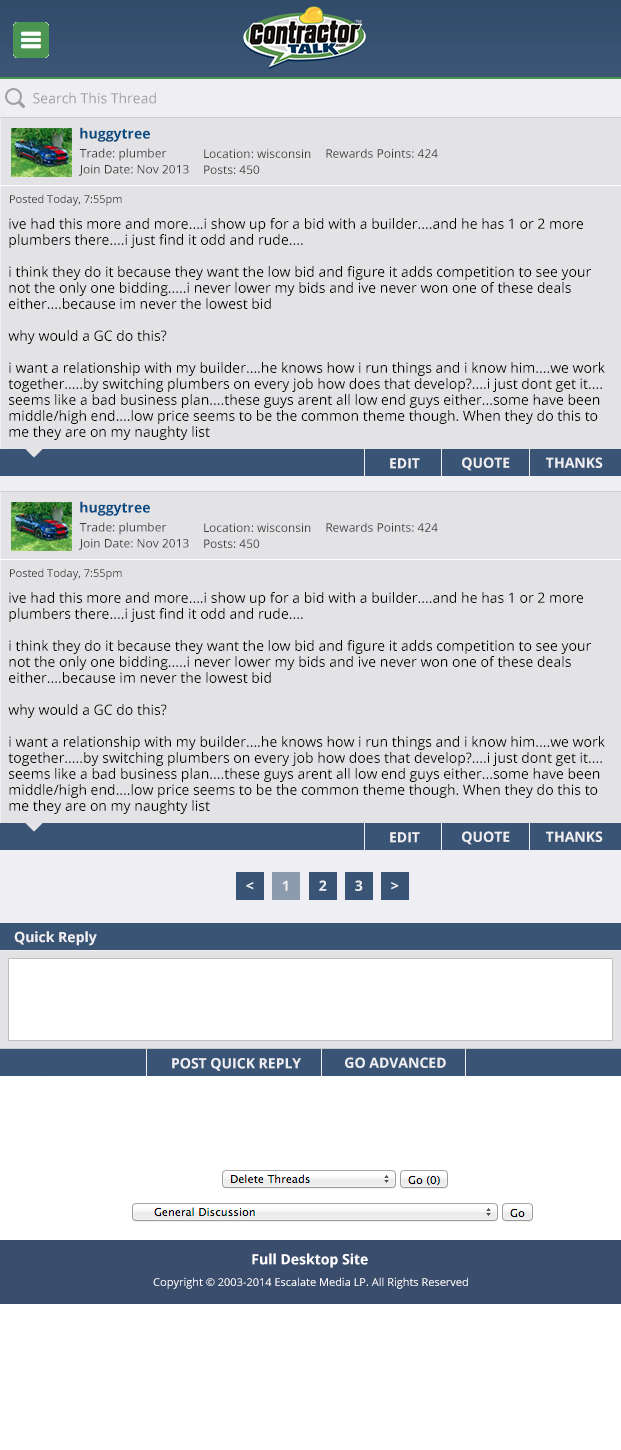
<style>
.page{position:relative;width:621px;height:1450px;background:#e3e3e6}
.page>*{position:absolute;margin:0}
.t1{font:14px "OpenSans";color:#9f9f9f}
.t2{font:14px "OpenSans-Bold";color:#084b82}
.t3{font:12px/16px "OpenSans";color:#3b3b3b}
.t4{font:12px "OpenSans";color:#3b3b3b}
.t5{font:11px "OpenSans";color:#3b3b3b}
.t6{font:14px/16px "OpenSans";color:#000000}
.t7{font:14px "OpenSans-Bold";color:#efeff3}
.t8{font:14px "OpenSans-Bold";color:#ffffff}
.t9{font:11px "OpenSans";color:#ffffff}
</style>
<div class="page">
<p class="t1" style="left:33px;top:92px;width:123px;height:12px">Search This Thread</p>
<p class="t2" style="left:80px;top:127px;width:70px;height:15px">huggytree</p>
<p class="t3" style="left:78px;top:148px;width:111px;height:28px">Trade: plumber<br>Join Date: Nov 2013</p>
<p class="t3" style="left:204px;top:149px;width:107px;height:25px">Location: wisconsin<br>Posts: 450</p>
<p class="t4" style="left:326px;top:148px;width:112px;height:10px">Rewards Points: 424</p>
<p class="t5" style="left:10px;top:194px;width:112px;height:12px">Posted Today, 7:55pm</p>
<p class="t6" style="left:8px;top:218px;width:597px;height:222px">ive had this more and more....i show up for a bid with a builder....and he has 1 or 2 more <br>plumbers there....i just find it odd and rude....<br><br>i think they do it because they want the low bid and figure it adds competition to see your <br>not the only one bidding.....i never lower my bids and ive never won one of these deals <br>either....because im never the lowest bid<br><br>why would a GC do this?<br><br>i want a relationship with my builder....he knows how i run things and i know him....we work <br>together.....by switching plumbers on every job how does that develop?....i just dont get it....<br>seems like a bad business plan....these guys arent all low end guys either...some have been <br>middle/high end....low price seems to be the common theme though. When they do this to <br>me they are on my naughty list</p>
<p class="t7" style="left:390px;top:458px;width:30px;height:11px">EDIT</p>
<p class="t7" style="left:462px;top:457px;width:48px;height:14px">QUOTE</p>
<p class="t7" style="left:546px;top:457px;width:57px;height:11px">THANKS</p>
<p class="t2" style="left:80px;top:501px;width:70px;height:15px">huggytree</p>
<p class="t3" style="left:78px;top:522px;width:111px;height:28px">Trade: plumber<br>Join Date: Nov 2013</p>
<p class="t3" style="left:204px;top:523px;width:107px;height:25px">Location: wisconsin<br>Posts: 450</p>
<p class="t4" style="left:326px;top:522px;width:112px;height:10px">Rewards Points: 424</p>
<p class="t5" style="left:10px;top:568px;width:112px;height:12px">Posted Today, 7:55pm</p>
<p class="t6" style="left:8px;top:592px;width:597px;height:222px">ive had this more and more....i show up for a bid with a builder....and he has 1 or 2 more <br>plumbers there....i just find it odd and rude....<br><br>i think they do it because they want the low bid and figure it adds competition to see your <br>not the only one bidding.....i never lower my bids and ive never won one of these deals <br>either....because im never the lowest bid<br><br>why would a GC do this?<br><br>i want a relationship with my builder....he knows how i run things and i know him....we work <br>together.....by switching plumbers on every job how does that develop?....i just dont get it....<br>seems like a bad business plan....these guys arent all low end guys either...some have been <br>middle/high end....low price seems to be the common theme though. When they do this to <br>me they are on my naughty list</p>
<p class="t7" style="left:390px;top:832px;width:30px;height:11px">EDIT</p>
<p class="t7" style="left:462px;top:831px;width:48px;height:14px">QUOTE</p>
<p class="t7" style="left:546px;top:831px;width:57px;height:11px">THANKS</p>
<p class="t7" style="left:282px;top:880px;width:6px;height:11px">1</p>
<p class="t7" style="left:319px;top:880px;width:8px;height:11px">2</p>
<p class="t7" style="left:355px;top:880px;width:8px;height:11px">3</p>
<p class="t7" style="left:246px;top:882px;width:8px;height:8px">&lt;</p>
<p class="t7" style="left:391px;top:882px;width:8px;height:8px">&gt;</p>
<p class="t7" style="left:14px;top:931px;width:83px;height:15px">Quick Reply</p>
<p class="t7" style="left:172px;top:1058px;width:129px;height:13px">POST QUICK REPLY</p>
<p class="t7" style="left:345px;top:1057px;width:101px;height:11px">GO ADVANCED</p>
<p class="t8" style="left:252px;top:1253px;width:116px;height:15px">Full Desktop Site</p>
<p class="t9" style="left:153px;top:1277px;width:315px;height:12px">Copyright © 2003-2014 Escalate Media LP. All Rights Reserved</p>
</div>
